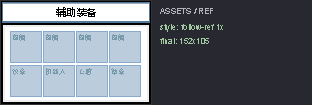
<style>
.page{position:relative;width:312px;height:105px;background:#282830}
.page>*{position:absolute;margin:0}
.t1{font:10px "MicrosoftYaHei";color:#000000}
.t2{font:8px "ArialMT";color:#b4b4be}
.t3{font:8px "ArialMT";color:#a0c8a0}
.t4{font:7px "NSimSun";color:#7799aa}
</style>
<div class="page">
<p class="t1" style="left:56px;top:7px;width:40px;height:10px">辅助装备</p>
<p class="t2" style="left:160px;top:8px;width:53px;height:6px">ASSETS / REF</p>
<p class="t3" style="left:160px;top:24px;width:63px;height:8px">style: follow-ref 1x</p>
<p class="t4" style="left:13px;top:34px;width:12px;height:7px">图腾</p>
<p class="t4" style="left:46px;top:34px;width:12px;height:7px">图腾</p>
<p class="t4" style="left:79px;top:34px;width:12px;height:7px">图腾</p>
<p class="t4" style="left:112px;top:34px;width:12px;height:7px">图腾</p>
<p class="t3" style="left:160px;top:38px;width:49px;height:6px">final: 152x105</p>
<p class="t4" style="left:12px;top:68px;width:13px;height:7px">纹章</p>
<p class="t4" style="left:46px;top:68px;width:19px;height:7px">机器人</p>
<p class="t4" style="left:80px;top:68px;width:12px;height:7px">心脏</p>
<p class="t4" style="left:111px;top:68px;width:13px;height:7px">徽章</p>
</div>
